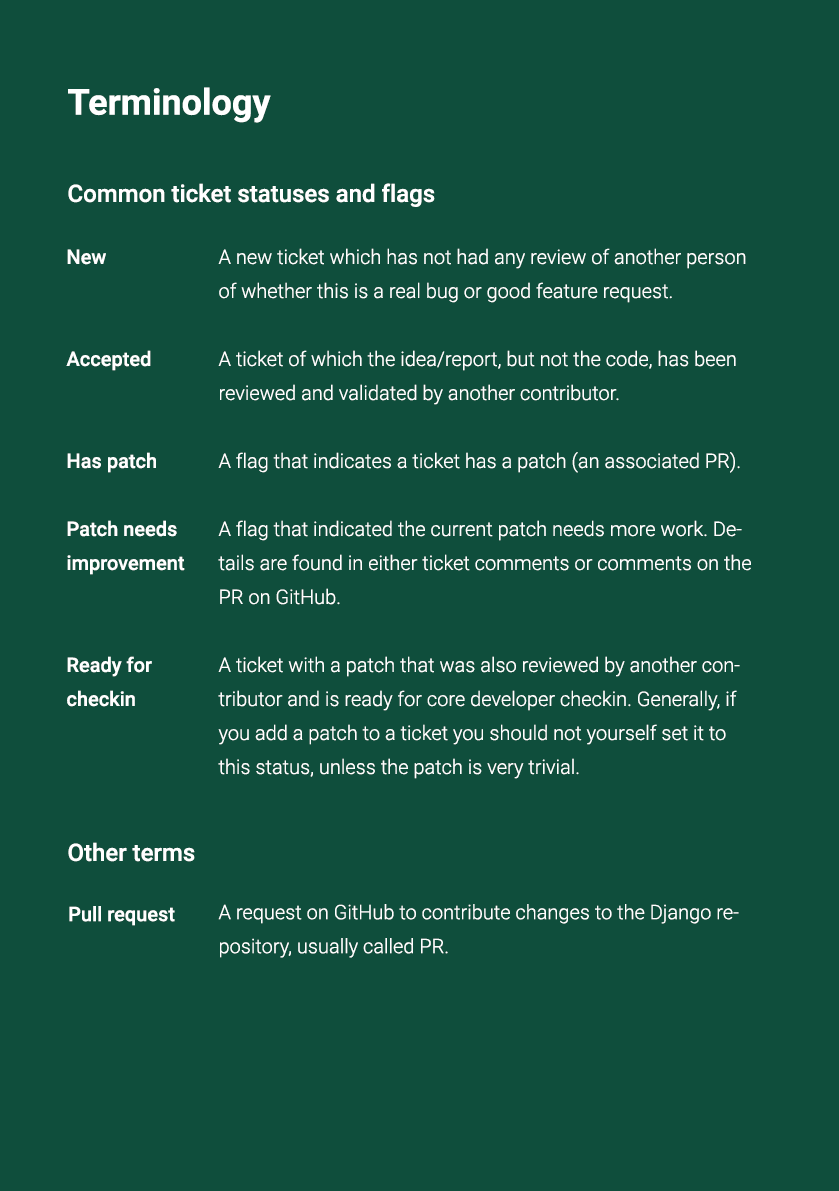
<style>
.page{position:relative;width:839px;height:1191px;background:#0f4e3c}
.page>*{position:absolute;margin:0}
.t1{font:36px "Roboto-Bold";color:#ffffff}
.t2{font:24px "Roboto-Medium";color:#ffffff}
.t3{font:20px/34px "Roboto-Medium";color:#ffffff}
.t4{font:20px/34px "Roboto-Light";color:#ffffff}
.t5{font:20px "Roboto-Medium";color:#ffffff}
</style>
<div class="page">
<p class="t1" style="left:68px;top:87px;width:203px;height:36px">Terminology</p>
<p class="t2" style="left:68px;top:183px;width:367px;height:24px">Common ticket statuses and flags</p>
<p class="t3" style="left:66px;top:249px;width:119px;height:458px">New<br><br><br>Accepted<br><br><br>Has patch<br><br>Patch needs<br>improvement<br><br><br>Ready for<br>checkin</p>
<p class="t4" style="left:218px;top:248px;width:533px;height:531px">A new ticket which has not had any review of another person of whether this is a real bug or good feature request.<br><br>A ticket of which the idea/report, but not the code, has been reviewed and validated by another contributor.<br><br>A flag that indicates a ticket has a patch (an associated PR).<br><br>A flag that indicated the current patch needs more work. Details are found in either ticket comments or comments on the PR on GitHub.<br><br>A ticket with a patch that was also reviewed by another contributor and is ready for core developer checkin. Generally, if you add a patch to a ticket you should not yourself set it to this status, unless the patch is very trivial.</p>
<p class="t2" style="left:68px;top:842px;width:127px;height:20px">Other terms</p>
<p class="t4" style="left:218px;top:904px;width:521px;height:54px">A request on GitHub to contribute changes to the Django repository, usually called PR.</p>
<p class="t5" style="left:69px;top:906px;width:106px;height:20px">Pull request</p>
</div>
